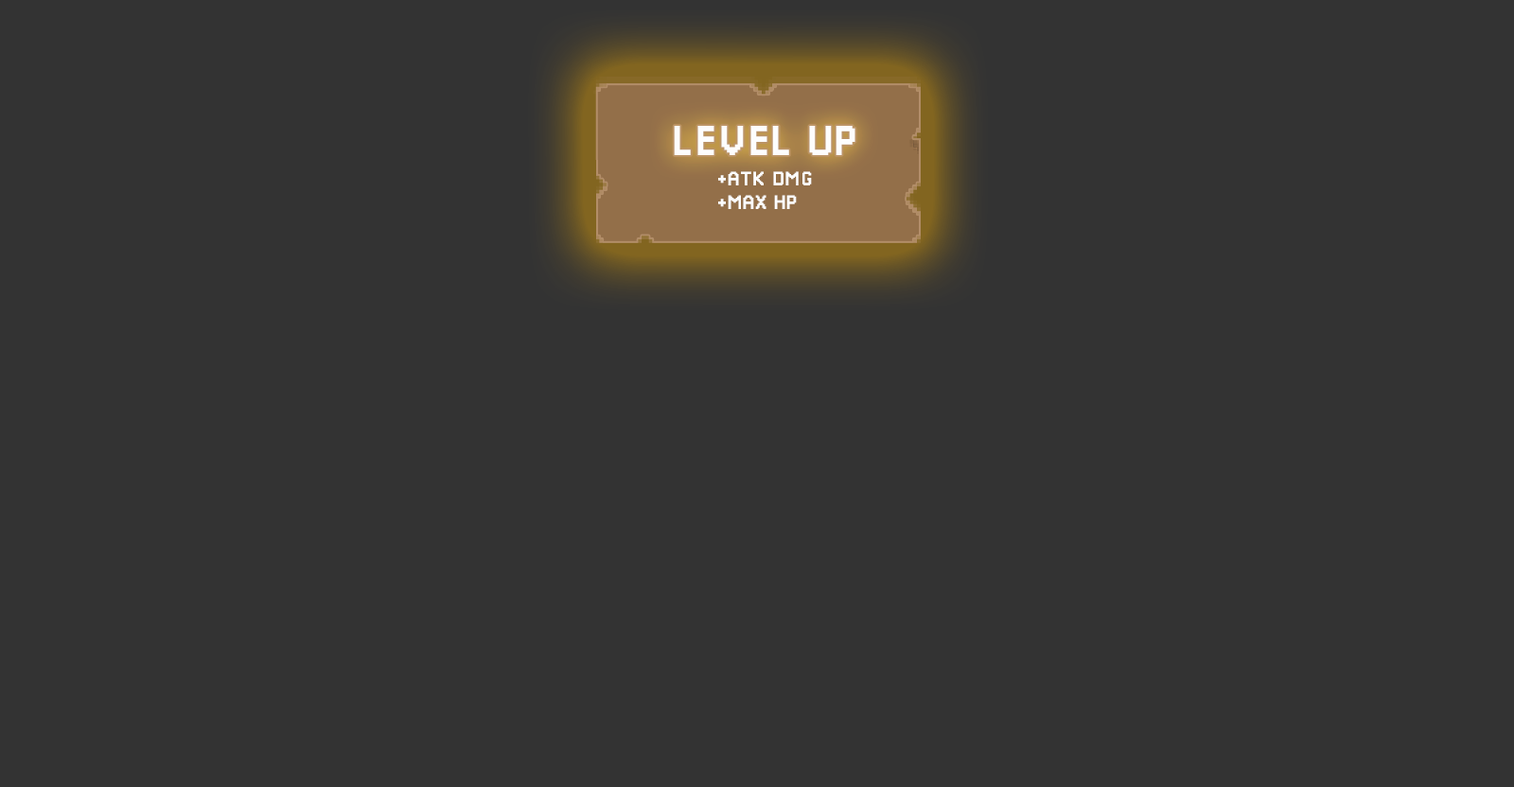
<style>
.page{position:relative;width:1514px;height:787px;background:#333333}
.page>*{position:absolute;margin:0}
.t1{font:42.6px "Pixellari";color:#fdfdfd}
.t2{font:20px "Pixellari";color:#fdfdfd}
</style>
<div class="page">
<p class="t1" style="left:674px;top:126px;width:182px;height:29px">LEVEL UP</p>
<p class="t2" style="left:718px;top:171px;width:94px;height:38px">+ATK DMG<br>+MAX HP</p>
</div>
